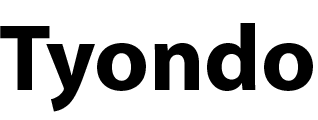
<style>
.page{position:relative;width:318px;height:120px;background:#ffffff}
.page>*{position:absolute;margin:0}
.t1{font:95px "MyriadPro-Bold";color:#000000}
</style>
<div class="page">
<p class="t1" style="left:0px;top:23px;width:313px;height:89px">Tyondo</p>
</div>
